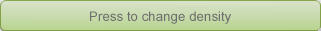
<style>
.page{position:relative;width:321px;height:31px}
.page>*{position:absolute;margin:0}
.t1{font:13.3px "ArialMT";color:#6e6e6e}
</style>
<div class="page">
<p class="t1" style="left:90px;top:11px;width:141px;height:13px">Press to change density</p>
</div>
